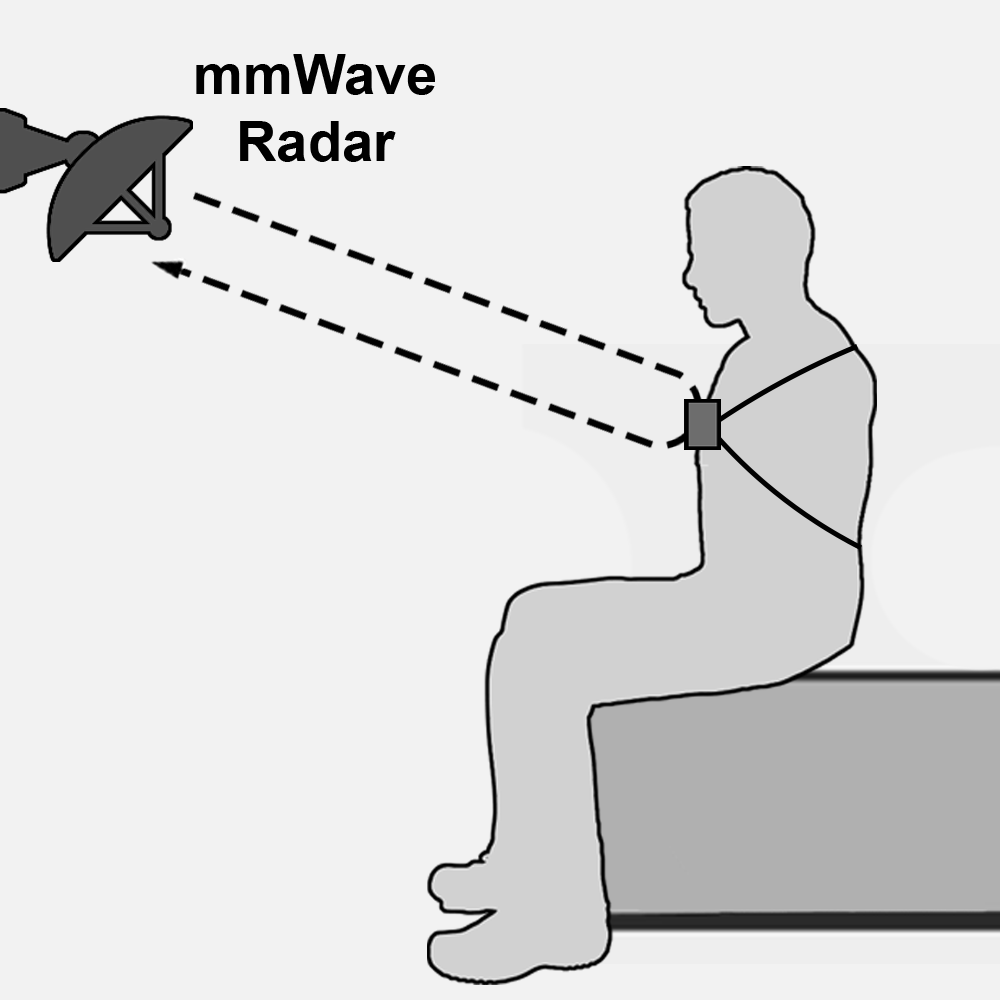
<style>
.page{position:relative;width:1000px;height:1000px;background:#f2f2f2}
.page>*{position:absolute;margin:0}
.t1{font:56px "Arial-BoldMT";color:#000000}
</style>
<div class="page">
<p class="t1" style="left:196px;top:54px;width:239px;height:108px;text-align:center">mmWave<br>Radar</p>
</div>
